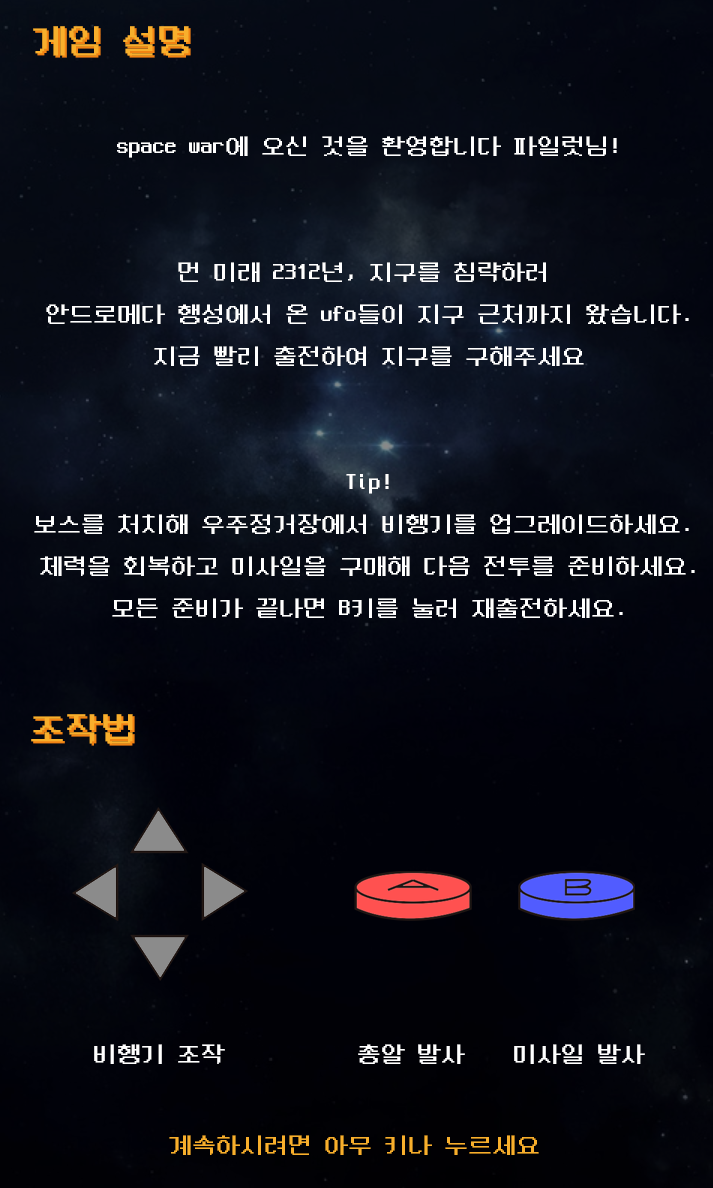
<style>
.page{position:relative;width:713px;height:1188px}
.page>*{position:absolute;margin:0}
.t1{font:36px "NeoDunggeunmo-Regular";color:#f8af2c}
.t2{font:36px "NeoDunggeunmo-Regular"}
.t3{font:24px "NeoDunggeunmo-Regular";color:#ffffff}
.t4{font:36px "NeoDunggeunmo-Regular";color:#f18313}
.t5{font:12px "NeoDunggeunmo-Regular";color:#ffffff}
.t6{font:12px "NeoDunggeunmo-Regular";color:#f8af2c}
</style>
<div class="page">
<p class="t1" style="left:33px;top:26px;width:156px;height:30px">게임 설명</p>
<p class="t2" style="left:35px;top:28px;width:156px;height:30px">게임 설명</p>
<p class="t3" style="left:34px;top:136px;width:661px;height:482px;text-align:center">space war에 오신 것을 환영합니다 파일럿님!<br><br><br>먼 미래 2312년, 지구를 침략하러 <br>안드로메다 행성에서 온 ufo들이 지구 근처까지 왔습니다.<br>지금 빨리 출전하여 지구를 구해주세요<br><br><br>Tip!<br>보스를 처치해 우주정거장에서 비행기를 업그레이드하세요. <br>체력을 회복하고 미사일을 구매해 다음 전투를 준비하세요.<br>모든 준비가 끝나면 B키를 눌러 재출전하세요.</p>
<p class="t1" style="left:31px;top:714px;width:102px;height:30px">조작법</p>
<p class="t4" style="left:33px;top:716px;width:102px;height:30px">조작법</p>
<p class="t5" style="left:94px;top:1044px;width:551px;height:20px">비행기 조작           총알 발사    미사일 발사</p>
<p class="t6" style="left:169px;top:1135px;width:370px;height:20px">계속하시려면 아무 키나 누르세요</p>
</div>
